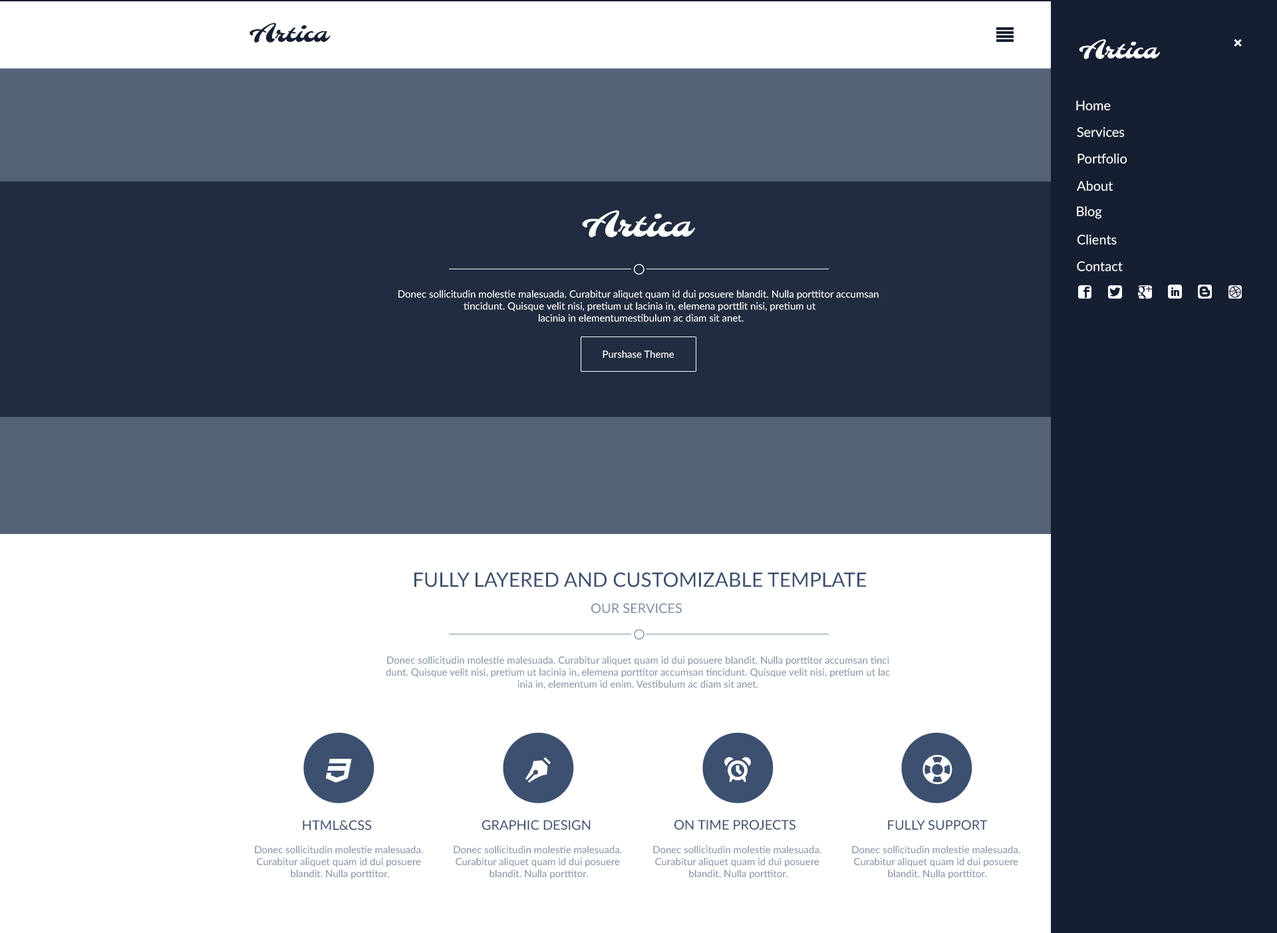
<style>
.page{position:relative;width:1277px;height:933px;background:#ffffff}
.page>*{position:absolute;margin:0}
.t1{font:24.6px "Molle-Regular";color:#161f32}
.t2{font:24.6px "Molle-Regular";color:#ffffff}
.t3{font:13.3px "Lato-Regular";color:#ffffff}
.t4{font:34.3px "Molle-Regular";color:#ffffff}
.t5{font:10px "Lato-Regular";color:#ffffff}
.t6{font:20px "Lato-Regular";color:#3d506f}
.t7{font:13.3px "Lato-Regular";color:#7f90a5}
.t8{font:10px "Lato-Regular";color:#7f90a5}
.t9{font:13.3px "Lato-Regular";color:#3d506f}
</style>
<div class="page">
<p class="t1" style="left:249px;top:23px;width:82px;height:20px">Artica</p>
<p class="t2" style="left:1079px;top:39px;width:82px;height:20px">Artica</p>
<p class="t3" style="left:1077px;top:100px;width:34px;height:10px">Home</p>
<p class="t3" style="left:1077px;top:127px;width:48px;height:10px">Services</p>
<p class="t3" style="left:1078px;top:154px;width:49px;height:10px">Portfolio</p>
<p class="t3" style="left:1077px;top:181px;width:37px;height:10px">About</p>
<p class="t3" style="left:1077px;top:206px;width:25px;height:13px">Blog</p>
<p class="t4" style="left:582px;top:210px;width:113px;height:28px">Artica</p>
<p class="t3" style="left:1078px;top:234px;width:39px;height:11px">Clients</p>
<p class="t3" style="left:1077px;top:261px;width:46px;height:10px">Contact</p>
<p class="t5" style="left:399px;top:290px;width:480px;height:32px;text-align:center">Donec sollicitudin molestie malesuada. Curabitur aliquet quam id dui posuere blandit. Nulla porttitor accumsan <br>tincidunt. Quisque velit nisi, pretium ut lacinia in, elemena porttlit nisi, pretium ut<br> lacinia in elementumestibulum ac diam sit anet.</p>
<p class="t5" style="left:603px;top:351px;width:71px;height:7px">Purshase Theme</p>
<p class="t6" style="left:415px;top:572px;width:452px;height:15px">FULLY LAYERED AND CUSTOMIZABLE TEMPLATE</p>
<p class="t7" style="left:591px;top:603px;width:91px;height:10px">OUR SERVICES</p>
<p class="t8" style="left:386px;top:657px;width:504px;height:32px;text-align:center">Donec sollicitudin molestie malesuada. Curabitur aliquet quam id dui posuere blandit. Nulla porttitor accumsan tinci<br>dunt. Quisque velit nisi, pretium ut lacinia in, elemena porttitor accumsan tincidunt. Quisque velit nisi, pretium ut lac<br>inia in, elementum id enim. Vestibulum ac diam sit anet.</p>
<p class="t9" style="left:303px;top:820px;width:69px;height:11px">HTML&amp;CSS</p>
<p class="t9" style="left:482px;top:820px;width:109px;height:10px">GRAPHIC DESIGN</p>
<p class="t9" style="left:675px;top:820px;width:121px;height:10px">ON TIME PROJECTS</p>
<p class="t9" style="left:888px;top:820px;width:100px;height:10px">FULLY SUPPORT</p>
<p class="t8" style="left:255px;top:846px;width:168px;height:34px;text-align:center">Donec sollicitudin molestie malesuada. <br>Curabitur aliquet quam id dui posuere <br>blandit. Nulla porttitor.</p>
<p class="t8" style="left:454px;top:846px;width:168px;height:34px;text-align:center">Donec sollicitudin molestie malesuada. <br>Curabitur aliquet quam id dui posuere <br>blandit. Nulla porttitor.</p>
<p class="t8" style="left:653px;top:846px;width:169px;height:34px;text-align:center">Donec sollicitudin molestie malesuada. <br>Curabitur aliquet quam id dui posuere <br>blandit. Nulla porttitor.</p>
<p class="t8" style="left:852px;top:846px;width:169px;height:34px;text-align:center">Donec sollicitudin molestie malesuada. <br>Curabitur aliquet quam id dui posuere <br>blandit. Nulla porttitor.</p>
</div>
